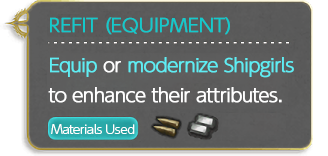
<style>
.page{position:relative;width:328px;height:156px}
.page>*{position:absolute;margin:0}
.t1{font:18px/30px "UDShinGoPro-Light";letter-spacing:-0.04em;color:#ffffff;font-weight:bold}
.t2{font:18px/40px "UDShinGoPro-Light";color:#14c9cb;font-weight:bold}
.t3{font:18px/40px "UDShinGoPro-Light";letter-spacing:-0.04em;color:#5eedf3;font-weight:bold}
.t4{font:18px/40px "UDShinGoPro-Light";letter-spacing:-0.04em;color:#ffffff;font-weight:bold}
.t5{font:18px/30px "UDShinGoPro-Light";letter-spacing:-0.04em;color:#5eedf3;font-weight:bold}
.t6{font:12px "UDShinGoPro-Light";letter-spacing:-0.04em;color:#ffffff}
</style>
<div class="page">
<p class="t1" style="left:48px;top:17px;width:246px;height:86px"><span class="t2">REFIT (EQUIPMENT)<br></span><span class="t3">Equip</span><span class="t4"> or </span><span class="t3">modernize </span><span class="t5">Shipgirls<br></span>to enhance their attributes.</p>
<p class="t6" style="left:51px;top:124px;width:84px;height:10px">Materials Used</p>
</div>
